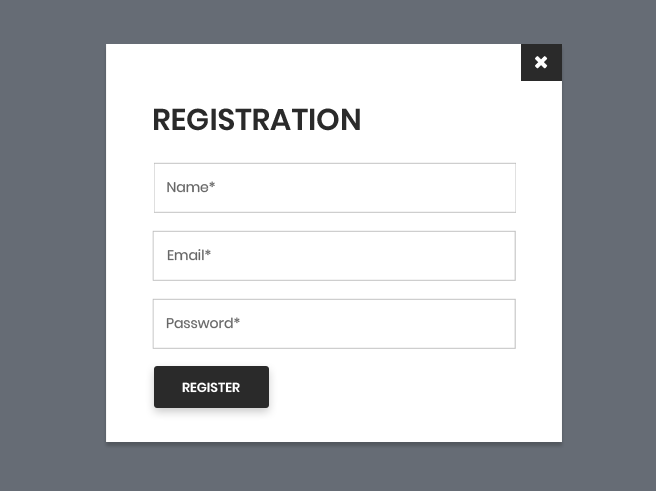
<style>
.page{position:relative;width:656px;height:491px;background:#ffffff}
.page>*{position:absolute;margin:0}
.t1{font:30px "Poppins-SemiBold";color:#2a2a2a;text-transform:uppercase}
.t2{font:14px "Poppins-Regular";color:#676767}
.t3{font:13px "Poppins-SemiBold";color:#ffffff;text-transform:uppercase}
</style>
<div class="page">
<p class="t1" style="left:154px;top:108px;width:206px;height:23px">registration</p>
<p class="t2" style="left:167px;top:181px;width:48px;height:12px">Name*</p>
<p class="t2" style="left:167px;top:249px;width:44px;height:12px">Email*</p>
<p class="t2" style="left:166px;top:317px;width:74px;height:12px">Password*</p>
<p class="t3" style="left:182px;top:382px;width:58px;height:11px">register</p>
</div>
